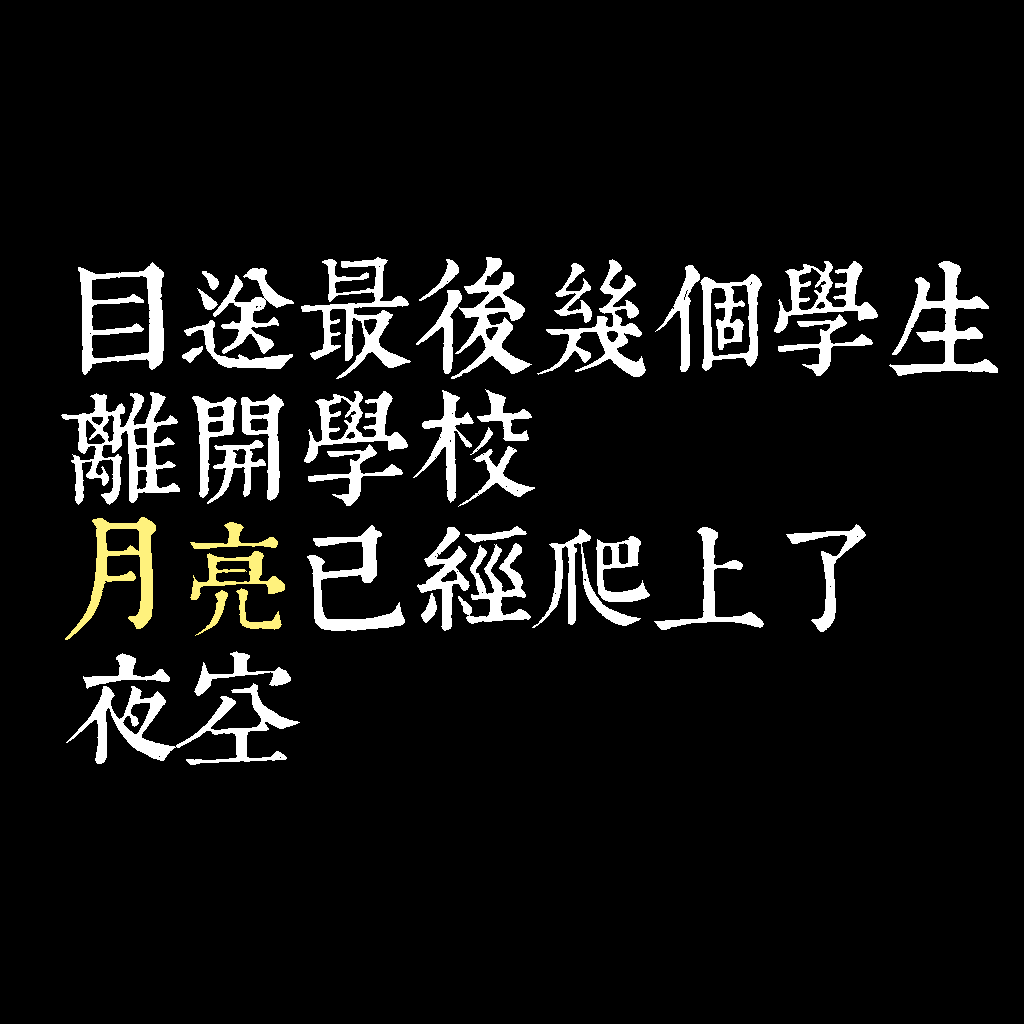
<style>
.page{position:relative;width:1024px;height:1024px;background:#000000}
.page>*{position:absolute;margin:0}
.t1{font:120px/130px "TpldKhangXiDictTrial";letter-spacing:-0.02em;color:#ffffff}
.t2{font:120px/130px "TpldKhangXiDictTrial";letter-spacing:-0.02em;color:#fff27d}
</style>
<div class="page">
<p class="t1" style="left:61px;top:257px;width:937px;height:508px">目送最後幾個學生<br>離開學校<br><span class="t2">月亮</span>已經爬上了<br>夜空</p>
</div>
